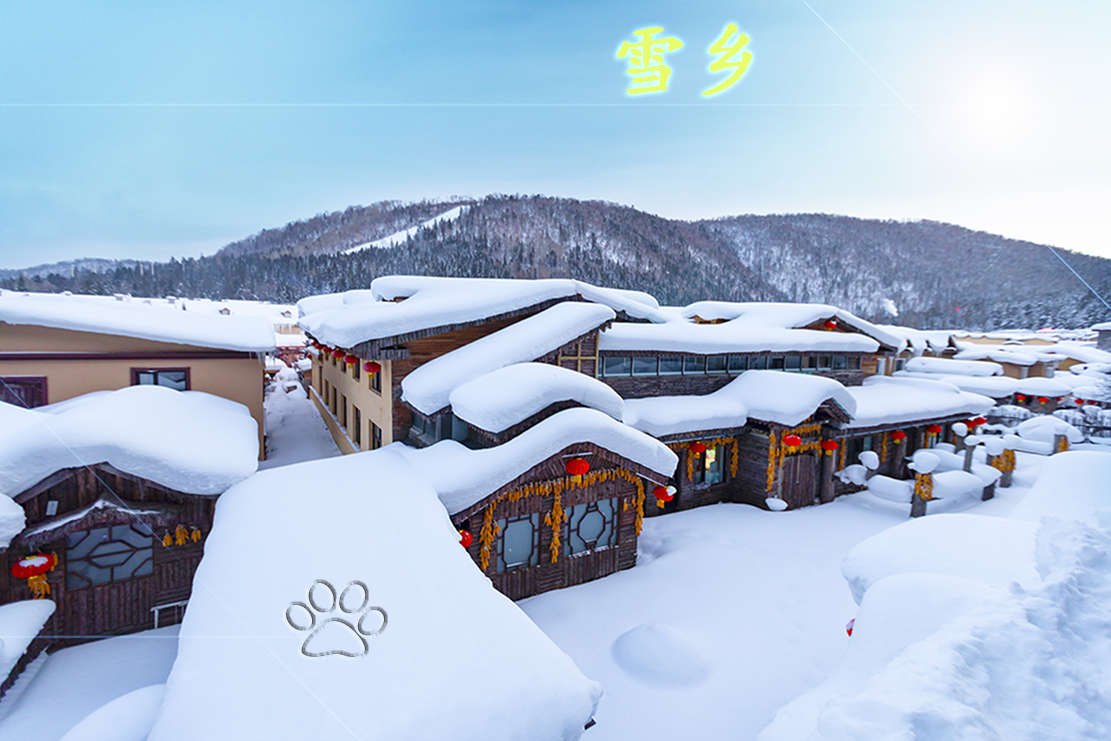
<style>
.page{position:relative;width:1111px;height:741px}
.page>*{position:absolute;margin:0}
.t1{font:80px "¿¬Ìå";color:#e7fd6c;font-weight:bold}
</style>
<div class="page">
<p class="t1" style="left:618px;top:23px;width:135px;height:72px">雪乡</p>
</div>
